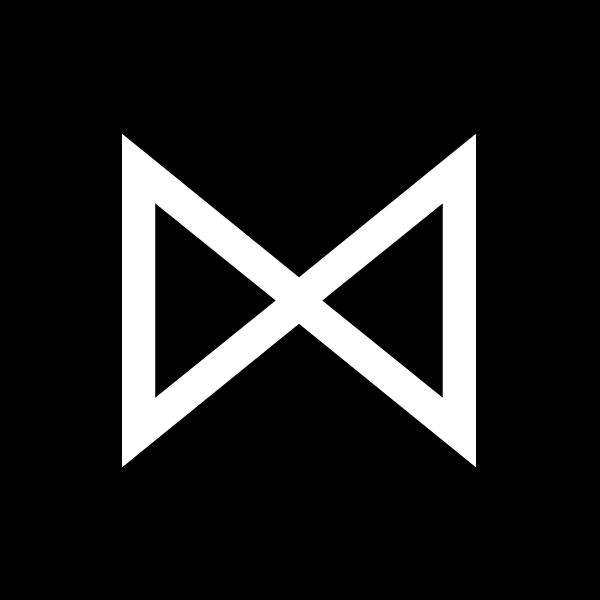
<style>
.page{position:relative;width:600px;height:600px;background:#000000}
.page>*{position:absolute;margin:0}
.t1{font:503.8px "STIXGeneral-Regular";color:#ffffff}
</style>
<div class="page">
<p class="t1" style="left:122px;top:133px;width:354px;height:335px">⋈</p>
</div>
